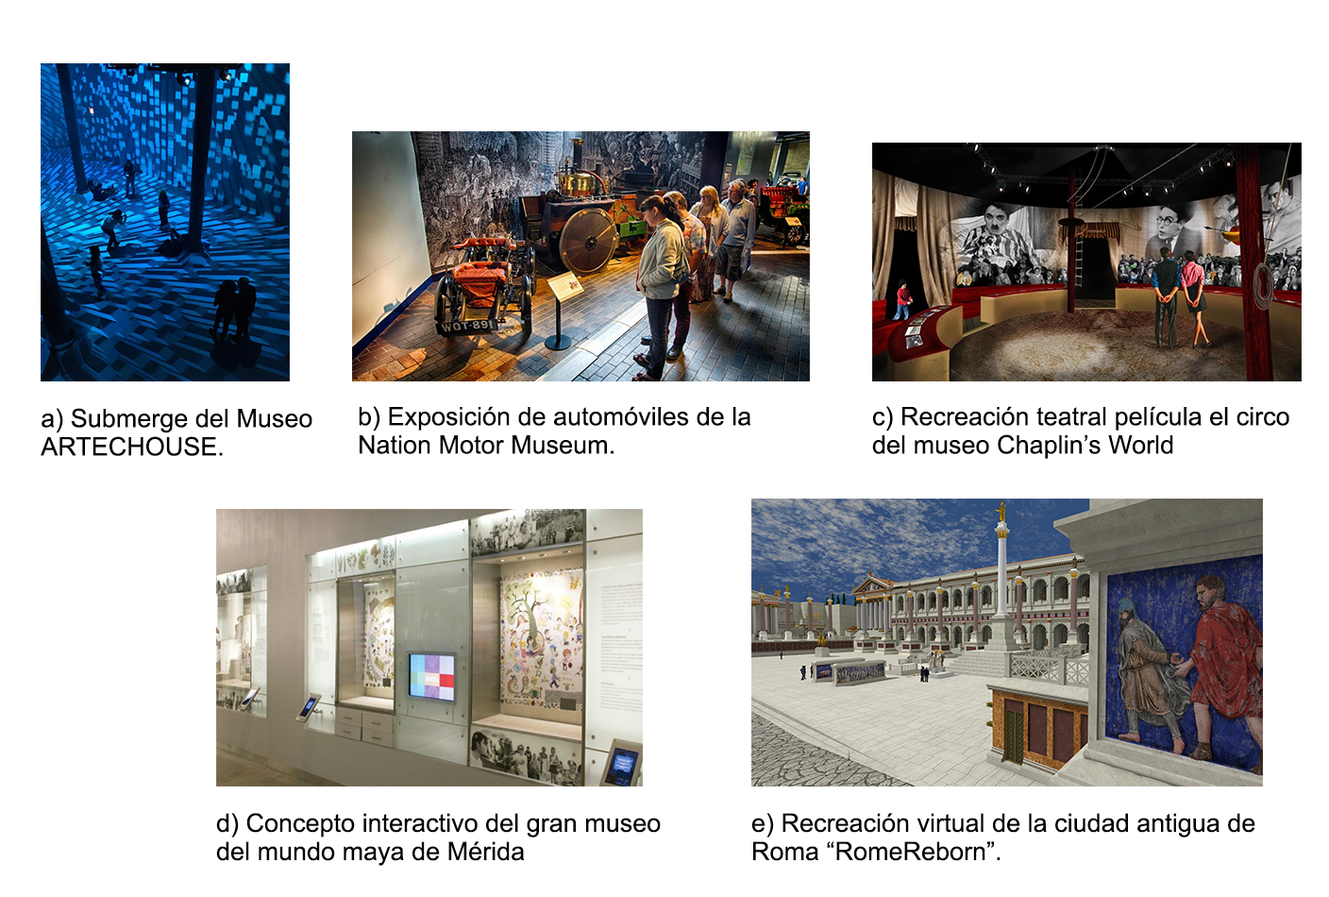
<style>
.page{position:relative;width:1329px;height:897px;background:#ffffff}
.page>*{position:absolute;margin:0}
.t1{font:25.5px/28.3px "ArialMT";color:#000000}
</style>
<div class="page">
<p class="t1" style="left:41px;top:408px;width:272px;height:48px">a) Submerge del Museo ARTECHOUSE.</p>
<p class="t1" style="left:359px;top:406px;width:393px;height:48px">b) Exposición de automóviles de la Nation Motor Museum.</p>
<p class="t1" style="left:872px;top:406px;width:418px;height:53px">c) Recreación teatral película el circo del museo Chaplin’s World</p>
<p class="t1" style="left:216px;top:813px;width:445px;height:53px">d) Concepto interactivo del gran museo del mundo maya de Mérida</p>
<p class="t1" style="left:752px;top:813px;width:504px;height:48px">e) Recreación virtual de la ciudad antigua de Roma “RomeReborn”.</p>
</div>
